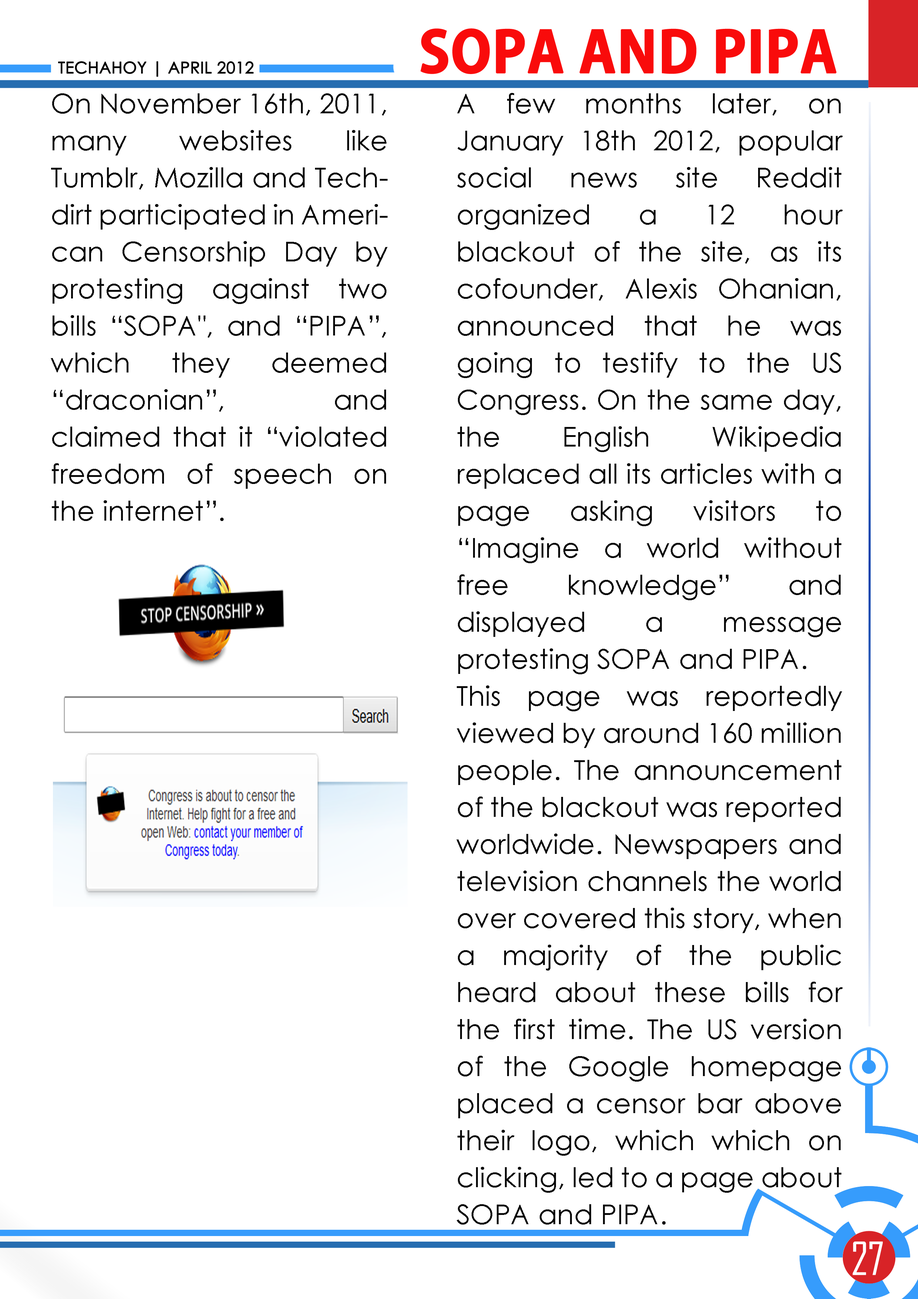
<style>
.page{position:relative;width:918px;height:1299px;background:#ffffff}
.page>*{position:absolute;margin:0}
.t1{font:55.5px "AdobeGothicStd-Bold";color:#f90b0b;text-transform:uppercase;font-weight:bold}
.t2{font:16px "CenturyGothic";color:#000000;text-transform:uppercase;font-weight:bold}
.t3{font:27.5px/37px "CenturyGothic";color:#080808}
.t4{font:43.7px "AgencyFB-Reg";color:#ffffff;text-transform:uppercase}
</style>
<div class="page">
<p class="t1" style="left:421px;top:28px;width:416px;height:46px">sopa and pipa</p>
<p class="t2" style="left:58px;top:61px;width:196px;height:16px">techahoy | APRIL 2012</p>
<p class="t3" style="left:51px;top:93px;width:337px;height:428px;text-align:justify">On November 16th, 2011, many websites like Tumblr, Mozilla and Techdirt participated in American Censorship Day by protesting against two bills “SOPA", and “PIPA”, which they deemed “draconian”, and claimed that it “violated freedom of speech on the internet”.</p>
<p class="t3" style="left:456px;top:93px;width:387px;height:1131px;text-align:justify">A few months later, on January 18th 2012, popular social news site Reddit organized a 12 hour blackout of the site, as its cofounder, Alexis Ohanian, announced that he was going to testify to the US Congress. On the same day, the English Wikipedia replaced all its articles with a page asking visitors to “Imagine a world without free knowledge” and displayed a message protesting SOPA and PIPA. <br>This page was reportedly viewed by around 160 million people. The announcement of the blackout was reported worldwide. Newspapers and television channels the world over covered this story, when a majority of the public heard about these bills for the first time. The US version of the Google homepage placed a censor bar above their logo, which which on clicking, led to a page about SOPA and PIPA.</p>
<p class="t4" style="left:853px;top:1241px;width:30px;height:34px">27</p>
</div>
